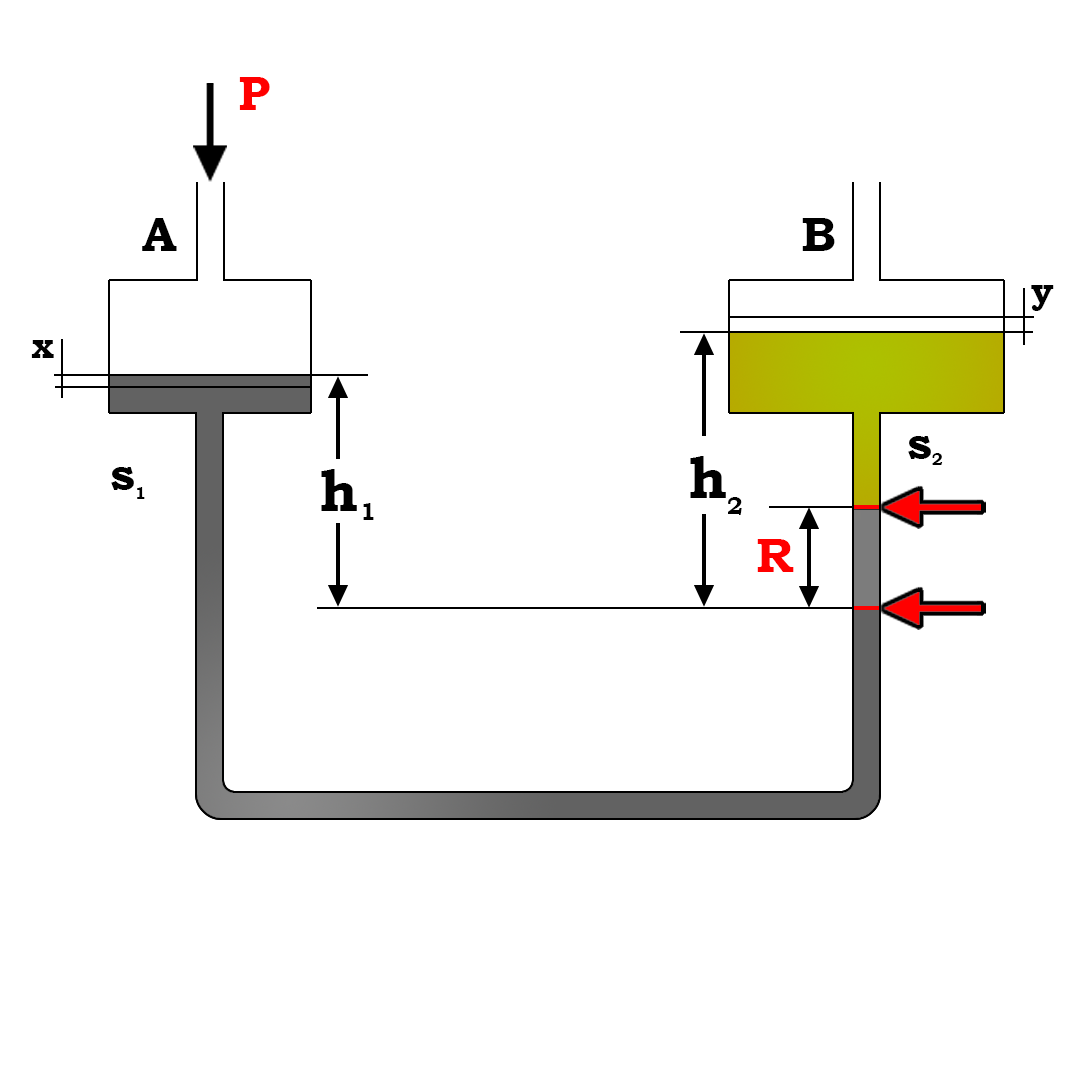
<style>
.page{position:relative;width:1080px;height:1080px;background:#ffffff}
.page>*{position:absolute;margin:0}
.t1{font:48px "BookmanOldStyle-Bold";color:#ff0000}
.t2{font:48px "BookmanOldStyle-Bold";color:#000000}
.t3{font:36px "BookmanOldStyle-Bold";color:#000000}
.t4{font:58.3px "BookmanOldStyle-Bold";color:#000000}
.t5{font:16.7px "BookmanOldStyle-Bold";color:#000000}
.t6{font:24px "BookmanOldStyle-Bold";color:#000000}
</style>
<div class="page">
<p class="t1" style="left:239px;top:77px;width:31px;height:33px">P</p>
<p class="t2" style="left:142px;top:218px;width:35px;height:33px">A</p>
<p class="t2" style="left:802px;top:218px;width:33px;height:33px">B</p>
<p class="t3" style="left:1031px;top:285px;width:23px;height:26px">y</p>
<p class="t3" style="left:31px;top:340px;width:23px;height:18px">x</p>
<p class="t2" style="left:908px;top:436px;width:23px;height:23px">s</p>
<p class="t4" style="left:690px;top:456px;width:36px;height:42px">h</p>
<p class="t5" style="left:932px;top:453px;width:11px;height:12px">2</p>
<p class="t2" style="left:111px;top:467px;width:23px;height:23px">s</p>
<p class="t4" style="left:321px;top:469px;width:36px;height:42px">h</p>
<p class="t5" style="left:137px;top:487px;width:8px;height:12px">1</p>
<p class="t6" style="left:728px;top:497px;width:14px;height:18px">2</p>
<p class="t6" style="left:363px;top:503px;width:11px;height:17px">1</p>
<p class="t1" style="left:757px;top:539px;width:37px;height:33px">R</p>
</div>
